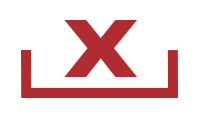
<style>
.page{position:relative;width:200px;height:120px;background:#ffffff}
.page>*{position:absolute;margin:0}
.t1{font:100.7px "NoyhGeometricSlim-Heavy";letter-spacing:-0.04em;color:#b12c31;scale:1.47 1}
</style>
<div class="page">
<p class="t1" style="left:64px;top:20px;width:73px;height:57px">X</p>
</div>
